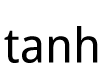
<style>
.page{position:relative;width:105px;height:83px;background:#ffffff}
.page>*{position:absolute;margin:0}
.t1{font:47.9px "DroidSans";color:#000000}
</style>
<div class="page">
<p class="t1" style="left:4px;top:26px;width:94px;height:37px">tanh</p>
</div>
